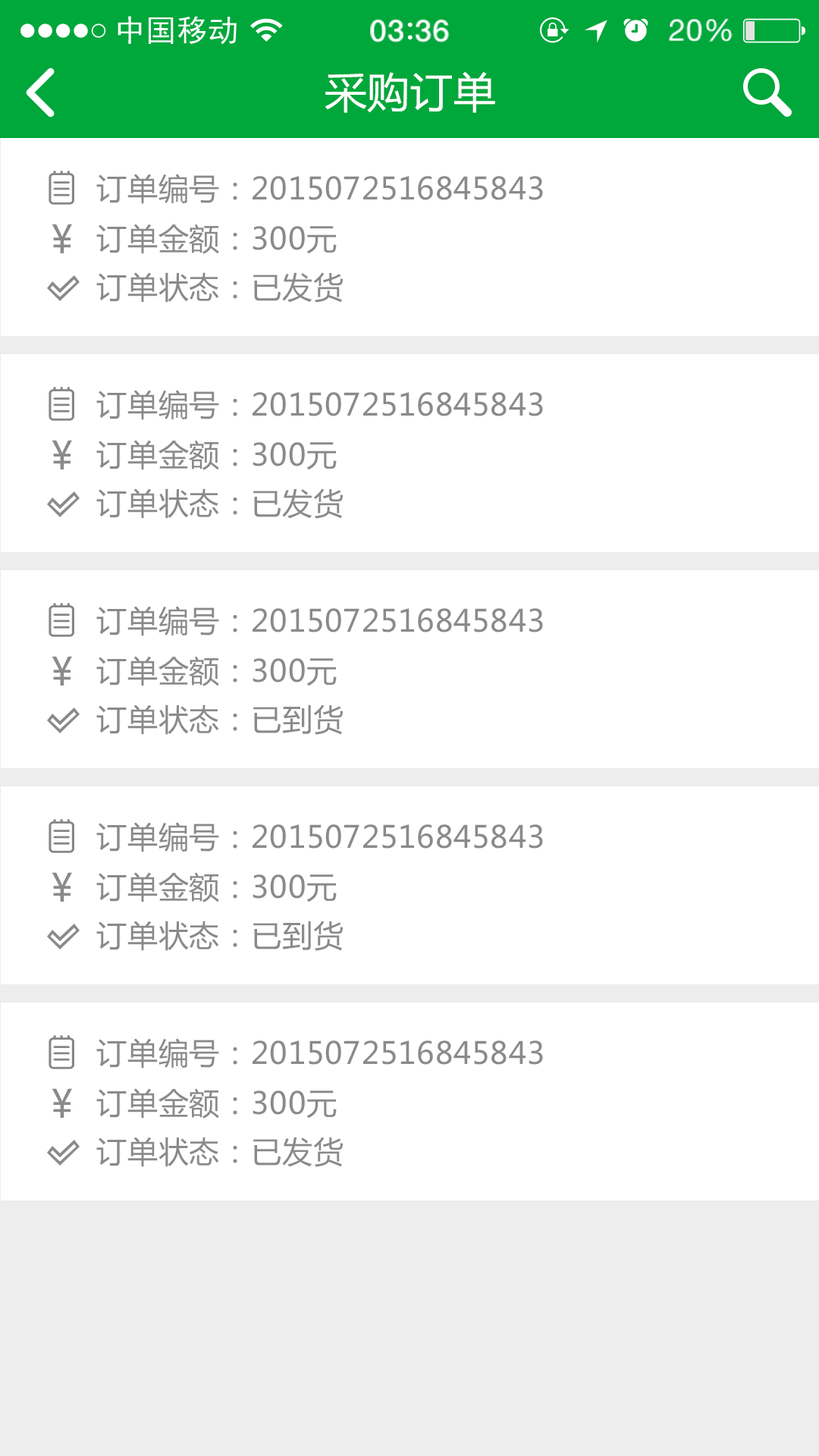
<style>
.page{position:relative;width:819px;height:1456px;background:#ffffff}
.page>*{position:absolute;margin:0}
.t1{font:41.7px "MicrosoftYaHei";letter-spacing:0.02em;color:#ffffff}
.t2{font:30.3px "MicrosoftYaHei";letter-spacing:0.02em;color:#8a8a8a}
.t3{font:38.4px "MicrosoftYaHei";letter-spacing:0.02em;color:#8a8a8a}
</style>
<div class="page">
<p class="t1" style="left:325px;top:71px;width:170px;height:42px">采购订单</p>
<p class="t2" style="left:96px;top:174px;width:447px;height:30px">订单编号：2015072516845843</p>
<p class="t3" style="left:52px;top:224px;width:20px;height:29px">¥</p>
<p class="t2" style="left:96px;top:224px;width:241px;height:30px">订单金额：300元</p>
<p class="t2" style="left:96px;top:272px;width:247px;height:31px">订单状态：已发货</p>
<p class="t2" style="left:96px;top:390px;width:447px;height:30px">订单编号：2015072516845843</p>
<p class="t3" style="left:52px;top:440px;width:20px;height:29px">¥</p>
<p class="t2" style="left:96px;top:440px;width:241px;height:30px">订单金额：300元</p>
<p class="t2" style="left:96px;top:488px;width:247px;height:31px">订单状态：已发货</p>
<p class="t2" style="left:96px;top:606px;width:447px;height:30px">订单编号：2015072516845843</p>
<p class="t3" style="left:52px;top:656px;width:20px;height:30px">¥</p>
<p class="t2" style="left:96px;top:656px;width:241px;height:30px">订单金额：300元</p>
<p class="t2" style="left:96px;top:704px;width:247px;height:31px">订单状态：已到货</p>
<p class="t2" style="left:96px;top:822px;width:447px;height:30px">订单编号：2015072516845843</p>
<p class="t3" style="left:52px;top:872px;width:20px;height:30px">¥</p>
<p class="t2" style="left:96px;top:872px;width:241px;height:30px">订单金额：300元</p>
<p class="t2" style="left:96px;top:921px;width:247px;height:30px">订单状态：已到货</p>
<p class="t2" style="left:96px;top:1038px;width:447px;height:30px">订单编号：2015072516845843</p>
<p class="t3" style="left:52px;top:1088px;width:20px;height:30px">¥</p>
<p class="t2" style="left:96px;top:1088px;width:241px;height:31px">订单金额：300元</p>
<p class="t2" style="left:96px;top:1137px;width:247px;height:30px">订单状态：已发货</p>
</div>
